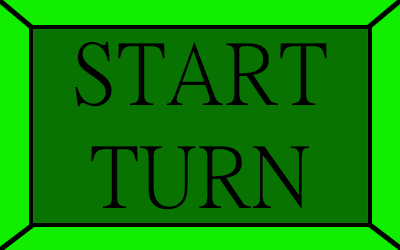
<style>
.page{position:relative;width:400px;height:250px;background:#087300}
.page>*{position:absolute;margin:0}
.t1{font:86px "PMingLiU-ExtB";color:#000000}
</style>
<div class="page">
<p class="t1" style="left:75px;top:42px;width:252px;height:168px;text-align:center">START<br>TURN</p>
</div>
